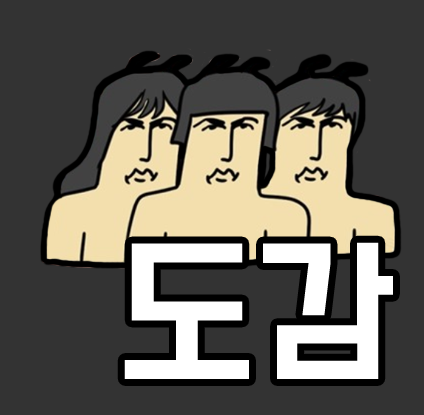
<style>
.page{position:relative;width:424px;height:415px;background:#333333}
.page>*{position:absolute;margin:0}
.t1{font:144px "BMDoHyeon";color:#ffffff}
</style>
<div class="page">
<p class="t1" style="left:124px;top:242px;width:269px;height:137px">도감</p>
</div>
